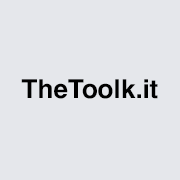
<style>
.page{position:relative;width:180px;height:180px;background:#e5e7eb}
.page>*{position:absolute;margin:0}
.t1{font:26px "Helvetica-Bold";color:#000000}
</style>
<div class="page">
<p class="t1" style="left:21px;top:79px;width:137px;height:20px">TheToolk.it</p>
</div>
